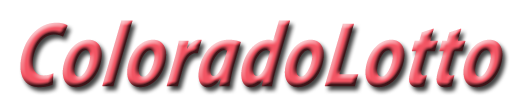
<style>
.page{position:relative;width:520px;height:100px;background:#ffffff}
.page>*{position:absolute;margin:0}
.t1{font:92px "MyriadPro-BoldIt";font-weight:bold;font-style:italic;scale:0.79 1}
</style>
<div class="page">
<p class="t1" style="left:20px;top:20px;width:483px;height:68px">ColoradoLotto</p>
</div>
